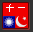
<style>
.page{position:relative;width:33px;height:32px;background:#f20000}
.page>*{position:absolute;margin:0}
.t1{font:10.4px "SimSun";color:#ffffff}
</style>
<div class="page">
<p class="t1" style="left:6px;top:4px;width:19px;height:8px">十一</p>
</div>
